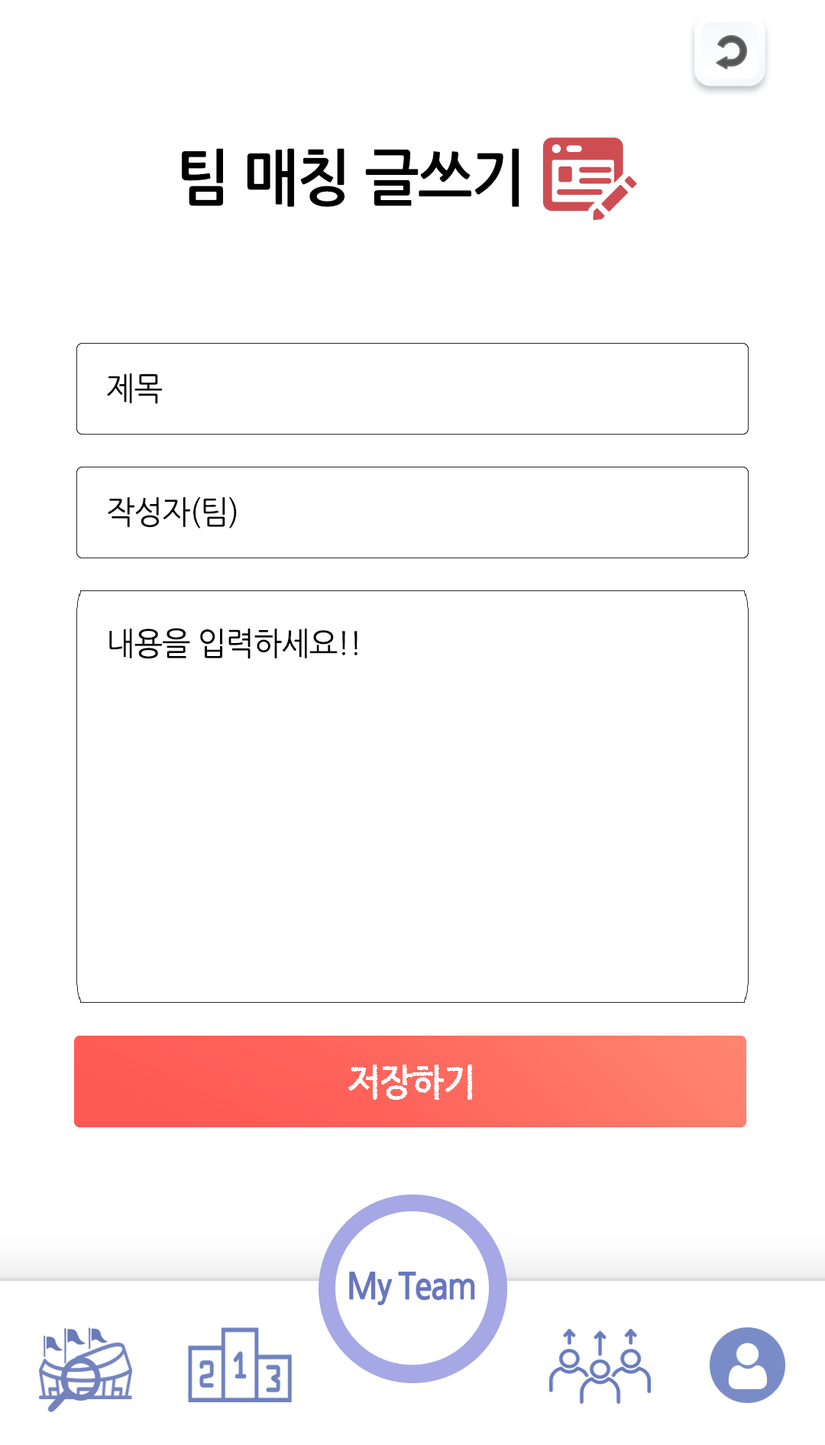
<style>
.page{position:relative;width:825px;height:1445px;background:#ffffff}
.page>*{position:absolute;margin:0}
.t1{font:61.1px "NanumGothicBold";letter-spacing:-0.025em;color:#000000;scale:0.95 1}
.t2{font:32.1px "NanumGothic";letter-spacing:-0.025em;color:#000000;scale:0.95 1}
.t3{font:36.7px "NanumGothicBold";letter-spacing:-0.025em;color:#ffffff;scale:0.95 1}
</style>
<div class="page">
<p class="t1" style="left:182px;top:148px;width:337px;height:59px">팀 매칭 글쓰기</p>
<p class="t2" style="left:107px;top:374px;width:55px;height:30px">제목</p>
<p class="t2" style="left:108px;top:497px;width:129px;height:32px">작성자(팀)</p>
<p class="t2" style="left:109px;top:628px;width:249px;height:31px">내용을 입력하세요!!</p>
<p class="t3" style="left:348px;top:1065px;width:124px;height:35px">저장하기</p>
</div>
